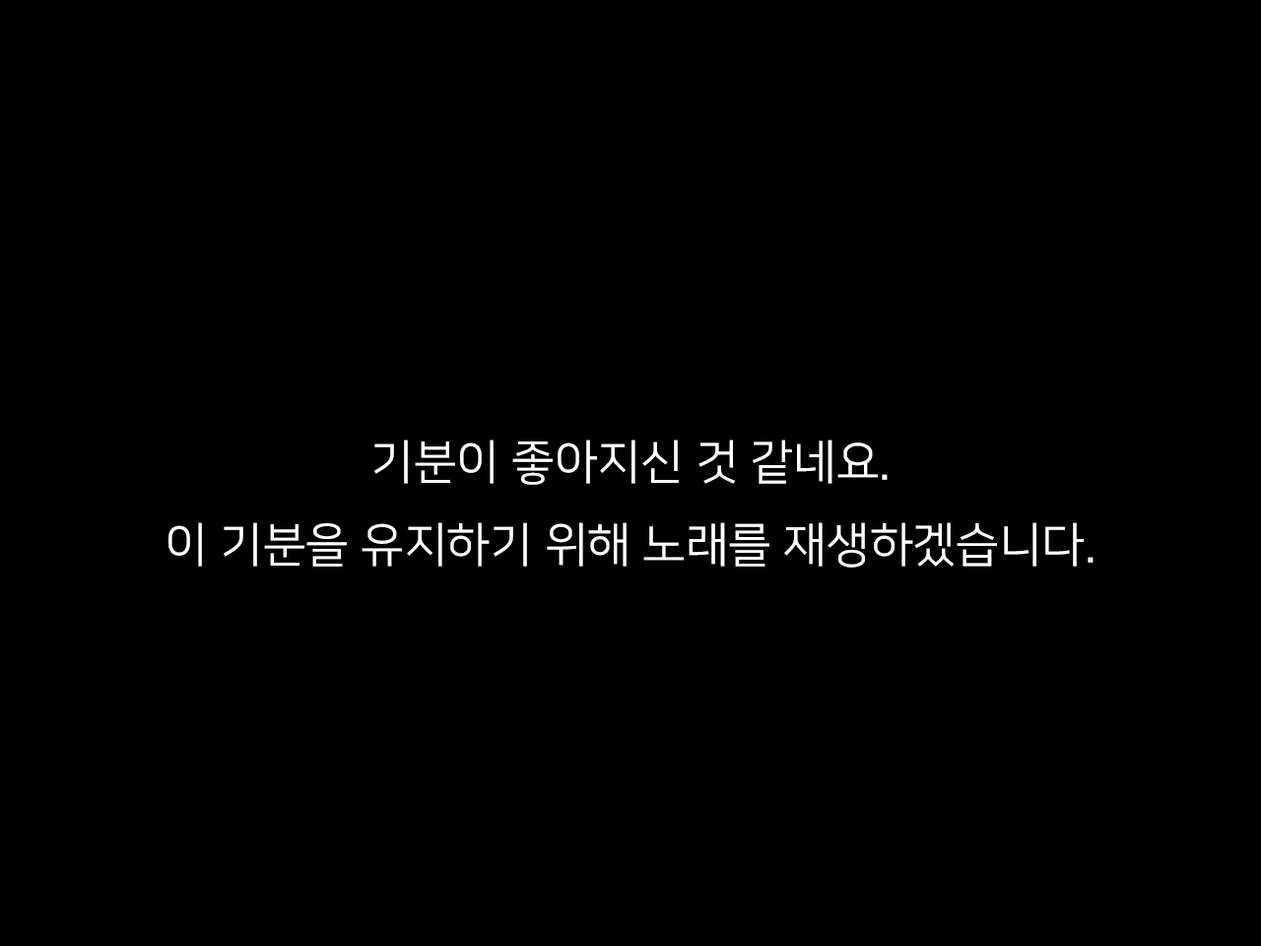
<style>
.page{position:relative;width:1261px;height:946px;background:#000000}
.page>*{position:absolute;margin:0}
.t1{font:47.3px "NanumSquareR";color:#ffffff}
</style>
<div class="page">
<p class="t1" style="left:168px;top:439px;width:925px;height:128px;text-align:center">기분이 좋아지신 것 같네요.<br>이 기분을 유지하기 위해 노래를 재생하겠습니다.</p>
</div>
